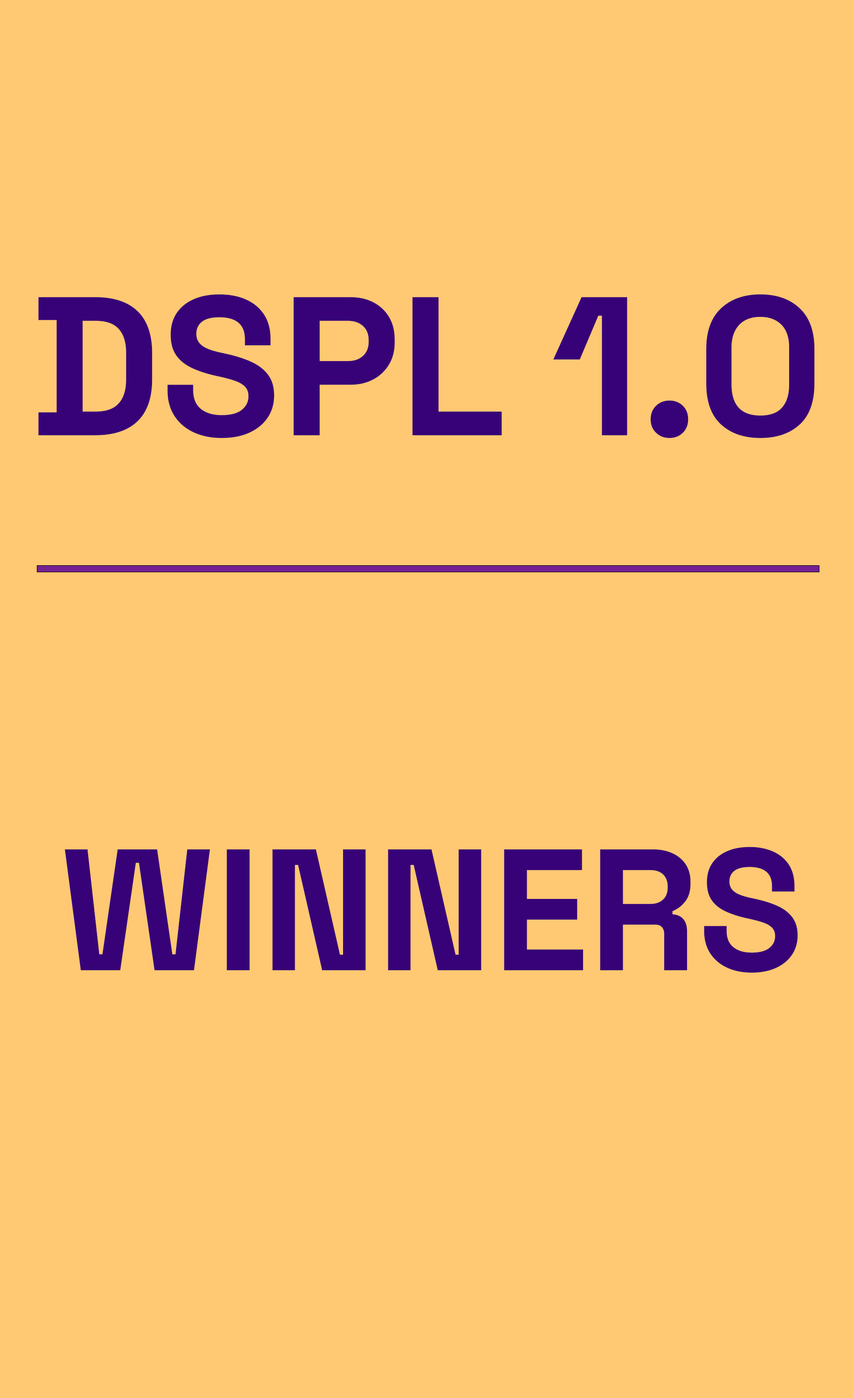
<style>
.page{position:relative;width:853px;height:1398px;background:#ffc872}
.page>*{position:absolute;margin:0}
.t1{font:197.3px "SpaceGrotesk-Bold";color:#370278}
.t2{font:172.6px "SpaceGrotesk-Bold";color:#370278}
</style>
<div class="page">
<p class="t1" style="left:38px;top:294px;width:777px;height:144px">DSPL 1.0</p>
<p class="t2" style="left:65px;top:847px;width:733px;height:126px">WINNERS</p>
</div>
